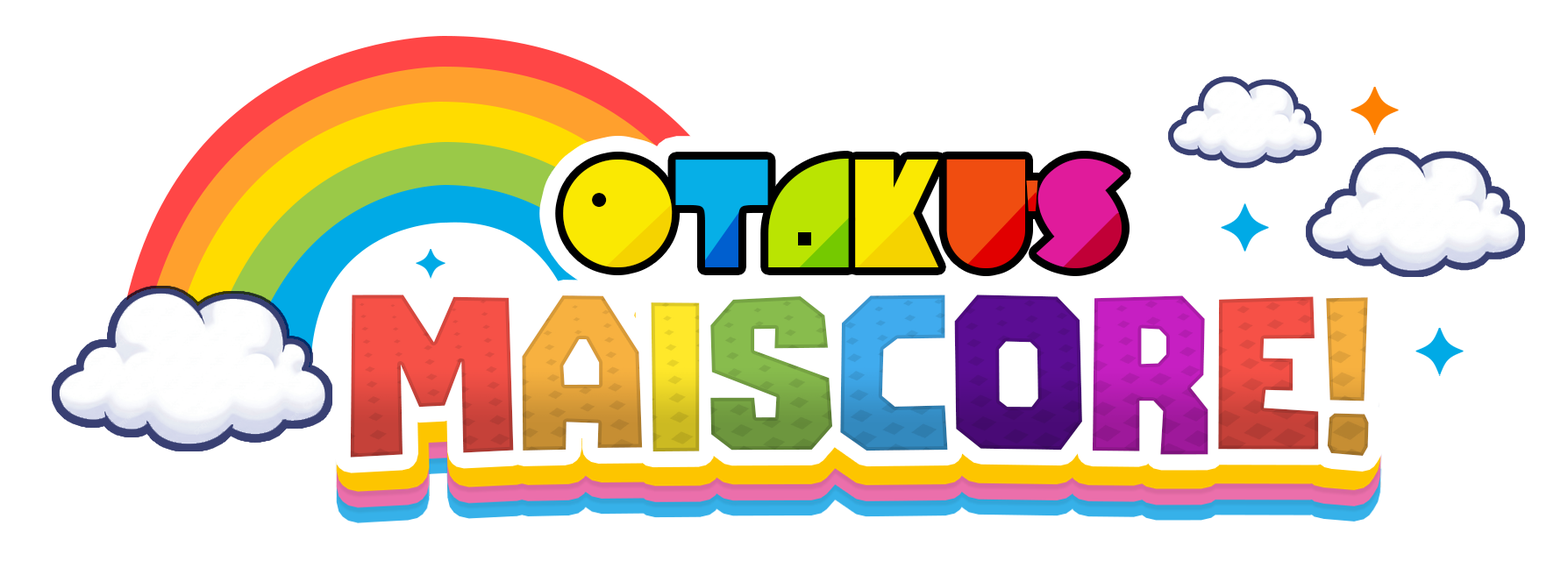
<style>
.page{position:relative;width:1568px;height:568px;background:#ffffff}
.page>*{position:absolute;margin:0}
.t1{font:127.4px "NyteLite-Regular";letter-spacing:-0.14em;color:#fae902}
.t2{font:127.4px "NyteLite-Regular";letter-spacing:-0.14em;color:#06afe7}
.t3{font:127.4px "NyteLite-Regular";letter-spacing:-0.14em;color:#bae402}
.t4{font:127.4px "NyteLite-Regular";letter-spacing:-0.14em;color:#f04d10}
.t5{font:127.4px "MyriadPro-Regular";letter-spacing:-0.14em;color:#f04d10}
.t6{font:127.4px "NyteLite-Regular";letter-spacing:-0.14em;color:#e01b9b}
.t7{font:229.4px "TheBombSoundRegular"}
</style>
<div class="page">
<p class="t1" style="left:563px;top:159px;width:560px;height:109px">o<span class="t2">t</span><span class="t3">a</span>k<span class="t4">u</span><span class="t5">'</span><span class="t6">s</span></p>
<p class="t7" style="left:350px;top:295px;width:1019px;height:163px">MAISCORE!</p>
</div>
